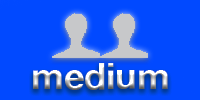
<style>
.page{position:relative;width:200px;height:100px;background:#0149ff}
.page>*{position:absolute;margin:0}
.t1{font:36px "HelveticaNeue-Bold"}
</style>
<div class="page">
<p class="t1" style="left:33px;top:63px;width:135px;height:27px">medium</p>
</div>
